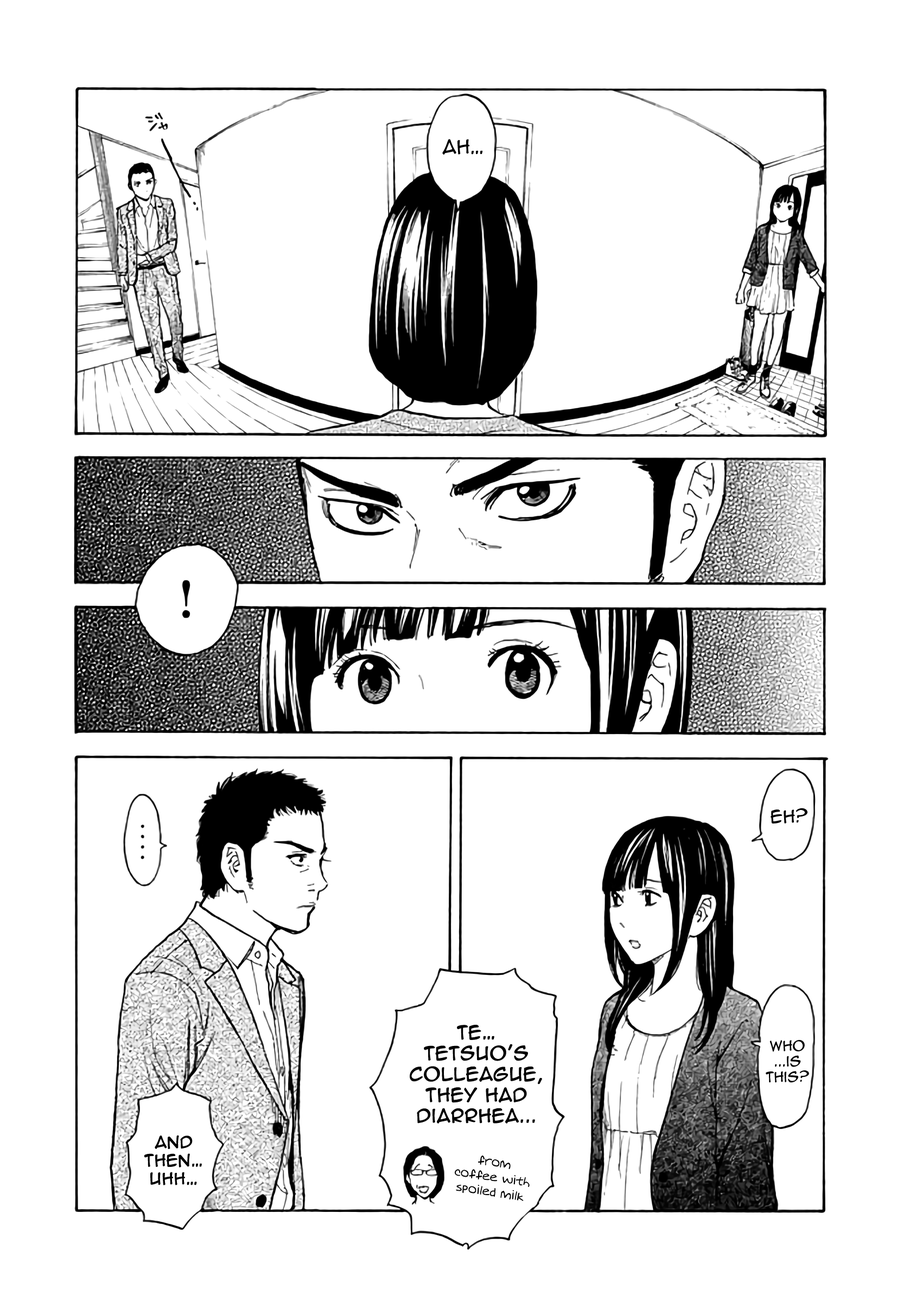
<style>
.page{position:relative;width:916px;height:1302px;background:#ffffff}
.page>*{position:absolute;margin:0}
.t1{font:17.9px "AnimeAce2.0BB";color:#000000}
.t2{font:16.3px "AnimeAce2.0BB";color:#000000}
.t3{font:17.4px "AnimeAce2.0BB";color:#000000;font-weight:bold}
.t4{font:13px "AnimeAce2.0BB";color:#000000}
.t5{font:15.2px "AnimeAce2.0BB";color:#000000;font-weight:bold}
.t6{font:12.5px "Augie";color:#000000}
</style>
<div class="page">
<p class="t1" style="left:442px;top:139px;width:41px;height:16px">Ah…</p>
<p class="t2" style="left:770px;top:808px;width:37px;height:16px">Eh?</p>
<p class="t3" style="left:410px;top:1025px;width:132px;height:99px;text-align:center">Te… <br>tetsuo's <br>colleague, <br>they had<br>diarrhea...</p>
<p class="t4" style="left:766px;top:1040px;width:43px;height:43px;text-align:center">Who<br>...is<br>this?</p>
<p class="t5" style="left:144px;top:1136px;width:58px;height:49px;text-align:center">And <br>then… <br>uhh…</p>
<p class="t6" style="left:455px;top:1156px;width:75px;height:45px;text-align:center;rotate:9deg">from <br>coffee with <br>spoiled milk</p>
</div>
